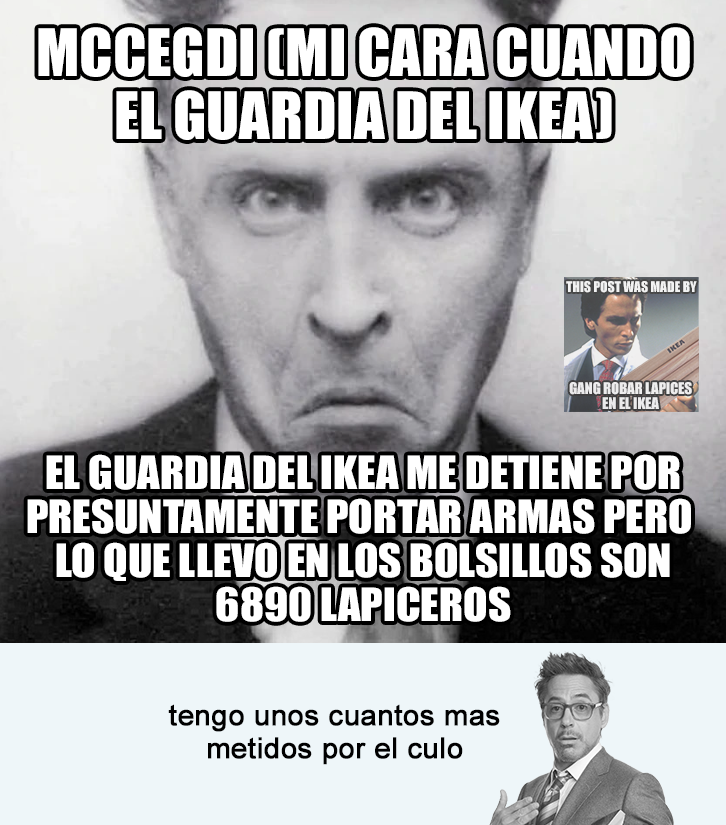
<style>
.page{position:relative;width:726px;height:825px}
.page>*{position:absolute;margin:0}
.t1{font:60.5px "Impact";color:#ffffff}
.t2{font:42.5px "Impact";color:#ffffff;scale:1.05 1}
.t3{font:28.9px "ArialMT";color:#000000;font-weight:bold}
</style>
<div class="page">
<p class="t1" style="left:38px;top:27px;width:652px;height:113px;text-align:center">MCCEGDI (MI CARA CUANDO<br>EL GUARDIA DEL IKEA)</p>
<p class="t2" style="left:27px;top:454px;width:664px;height:168px;text-align:center">EL GUARDIA DEL IKEA ME DETIENE POR<br>PRESUNTAMENTE PORTAR ARMAS PERO <br>LO QUE LLEVO EN LOS BOLSILLOS SON<br>6890 LAPICEROS</p>
<p class="t3" style="left:168px;top:704px;width:332px;height:61px;text-align:center">tengo unos cuantos mas<br>metidos por el culo</p>
</div>
